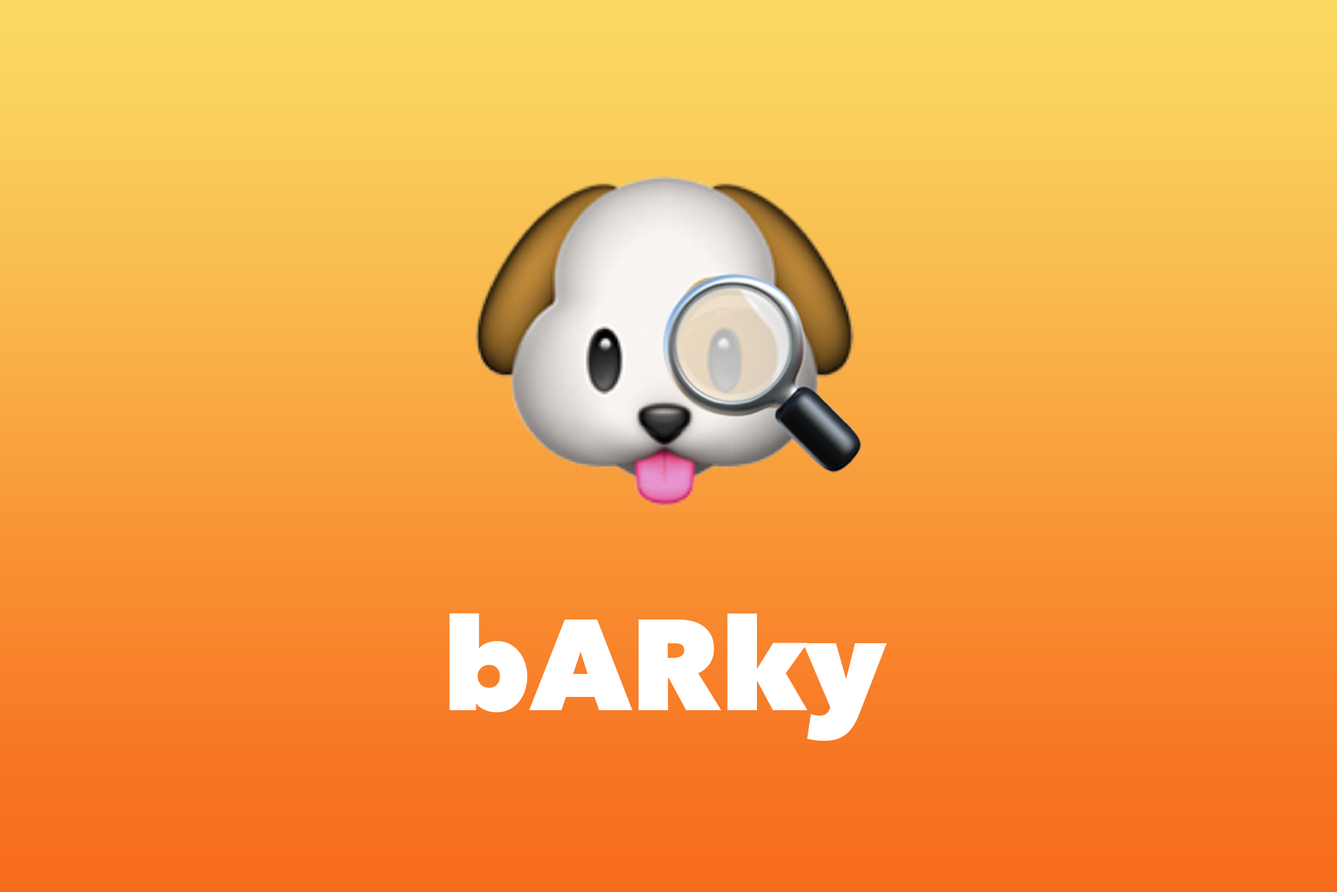
<style>
.page{position:relative;width:1337px;height:892px}
.page>*{position:absolute;margin:0}
.t1{font:127.4px "AvenirNext-Heavy";color:#ffffff}
</style>
<div class="page">
<p class="t1" style="left:449px;top:613px;width:438px;height:127px">bARky</p>
</div>
